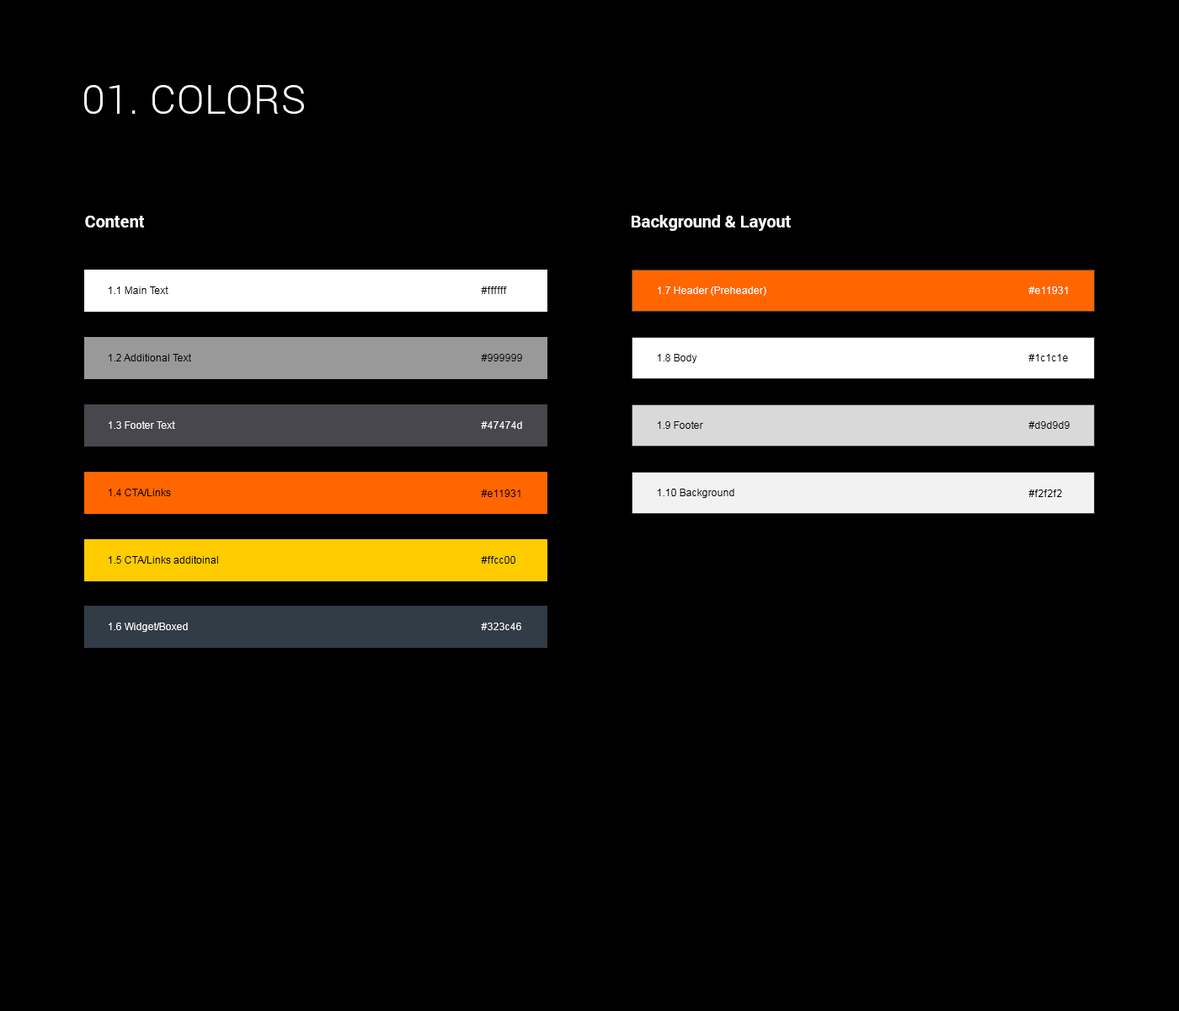
<style>
.page{position:relative;width:1179px;height:1011px;background:#000000}
.page>*{position:absolute;margin:0}
.t1{font:40.4px "Roboto-Light";letter-spacing:0.02em;color:#ffffff}
.t2{font:16.8px "Roboto-Bold";color:#ffffff}
.t3{font:10.1px "ArialMT";color:#000000}
.t4{font:10.1px "ArialMT";color:#ffffff}
</style>
<div class="page">
<p class="t1" style="left:84px;top:85px;width:220px;height:29px">01. COLORS</p>
<p class="t2" style="left:85px;top:216px;width:60px;height:11px">Content</p>
<p class="t2" style="left:632px;top:215px;width:159px;height:16px">Background &amp; Layout</p>
<p class="t3" style="left:109px;top:286px;width:59px;height:8px">1.1 Main Text</p>
<p class="t3" style="left:481px;top:286px;width:26px;height:8px">#ffffff</p>
<p class="t4" style="left:658px;top:286px;width:109px;height:10px">1.7 Header (Preheader)</p>
<p class="t4" style="left:1029px;top:286px;width:39px;height:8px">#e11931</p>
<p class="t3" style="left:109px;top:354px;width:82px;height:7px">1.2 Additional Text</p>
<p class="t3" style="left:481px;top:354px;width:41px;height:7px">#999999</p>
<p class="t3" style="left:658px;top:354px;width:40px;height:9px">1.8 Body</p>
<p class="t3" style="left:1029px;top:354px;width:39px;height:7px">#1c1c1e</p>
<p class="t4" style="left:109px;top:421px;width:66px;height:8px">1.3 Footer Text</p>
<p class="t4" style="left:481px;top:421px;width:41px;height:8px">#47474d</p>
<p class="t3" style="left:658px;top:421px;width:45px;height:8px">1.9 Footer</p>
<p class="t3" style="left:1029px;top:421px;width:41px;height:8px">#d9d9d9</p>
<p class="t3" style="left:109px;top:489px;width:62px;height:7px">1.4 CTA/Links</p>
<p class="t3" style="left:481px;top:489px;width:40px;height:8px">#e11931</p>
<p class="t3" style="left:658px;top:489px;width:77px;height:9px">1.10 Background</p>
<p class="t3" style="left:1029px;top:489px;width:33px;height:8px">#f2f2f2</p>
<p class="t3" style="left:109px;top:556px;width:109px;height:8px">1.5 CTA/Links additoinal</p>
<p class="t3" style="left:481px;top:556px;width:35px;height:8px">#ffcc00</p>
<p class="t4" style="left:109px;top:623px;width:79px;height:9px">1.6 Widget/Boxed</p>
<p class="t4" style="left:481px;top:623px;width:40px;height:7px">#323c46</p>
</div>
